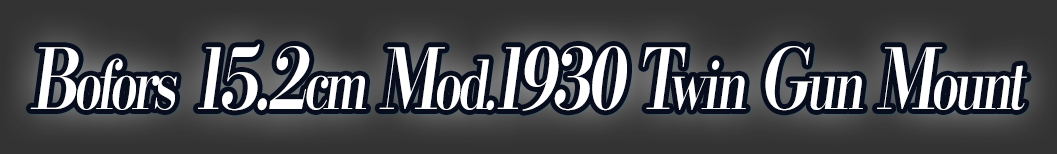
<style>
.page{position:relative;width:1057px;height:154px}
.page>*{position:absolute;margin:0}
.t1{font:84px "KochoStd-Heavy";letter-spacing:-0.08em;color:#ffffff;font-style:italic;scale:0.75 1}
.t2{font:67.2px "KochoStd-Heavy";letter-spacing:-0.08em;color:#ffffff;font-style:italic;scale:0.75 1}
</style>
<div class="page">
<p class="t1" style="left:30px;top:44px;width:997px;height:67px">B<span class="t2">ofors</span> 15.2<span class="t2">cm</span> M<span class="t2">od.</span>1930 T<span class="t2">win</span> G<span class="t2">un</span> M<span class="t2">ount</span></p>
</div>
